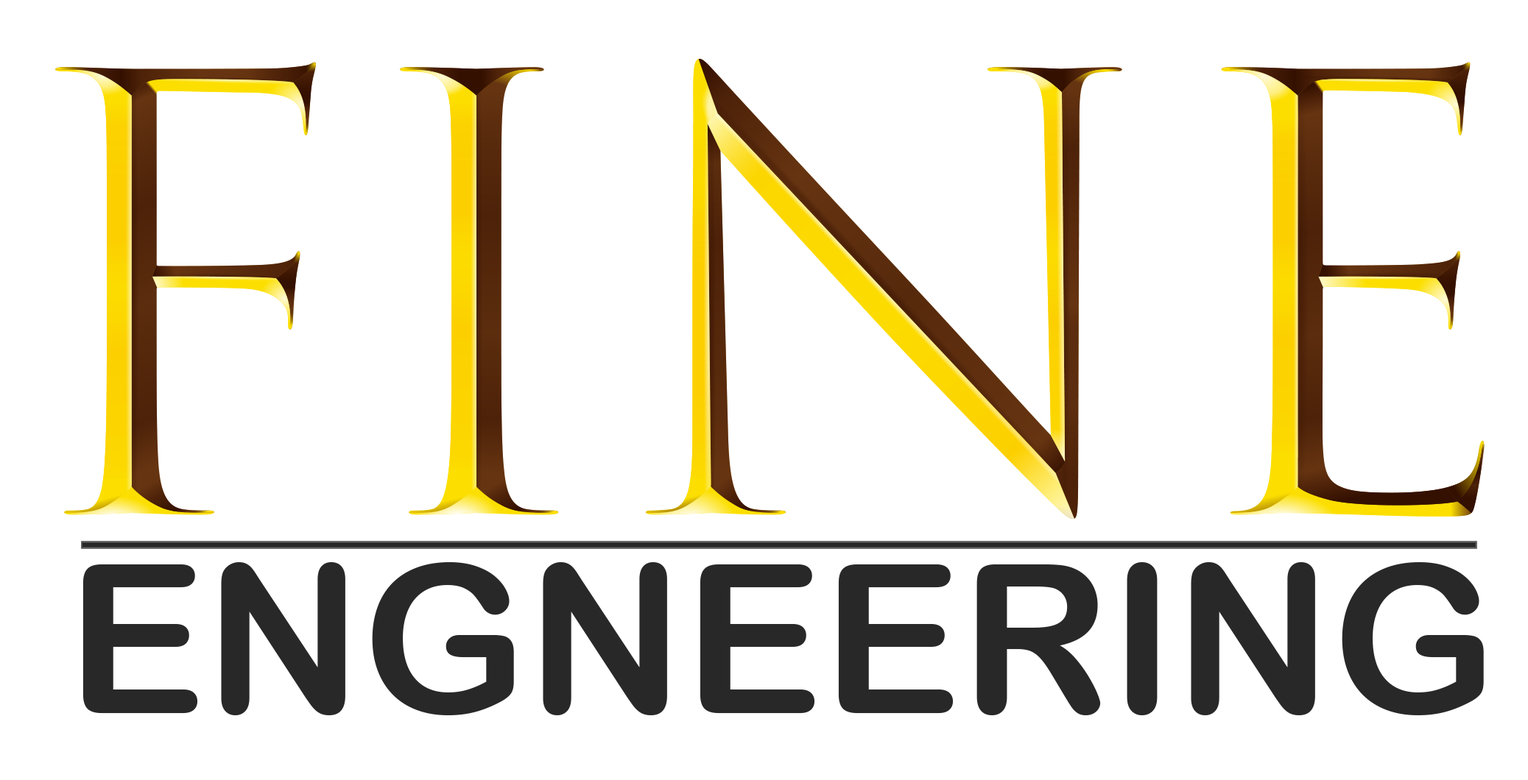
<style>
.page{position:relative;width:1528px;height:780px;background:#ffffff}
.page>*{position:absolute;margin:0}
.t1{font:592.3px "TrajanColor-Concept"}
.t2{font:207.3px "ArialRoundedMTBold";color:#282828}
</style>
<div class="page">
<p class="t1" style="left:55px;top:58px;width:1429px;height:462px">FINE</p>
<p class="t2" style="left:82px;top:563px;width:1402px;height:153px">ENGNEERING</p>
</div>
